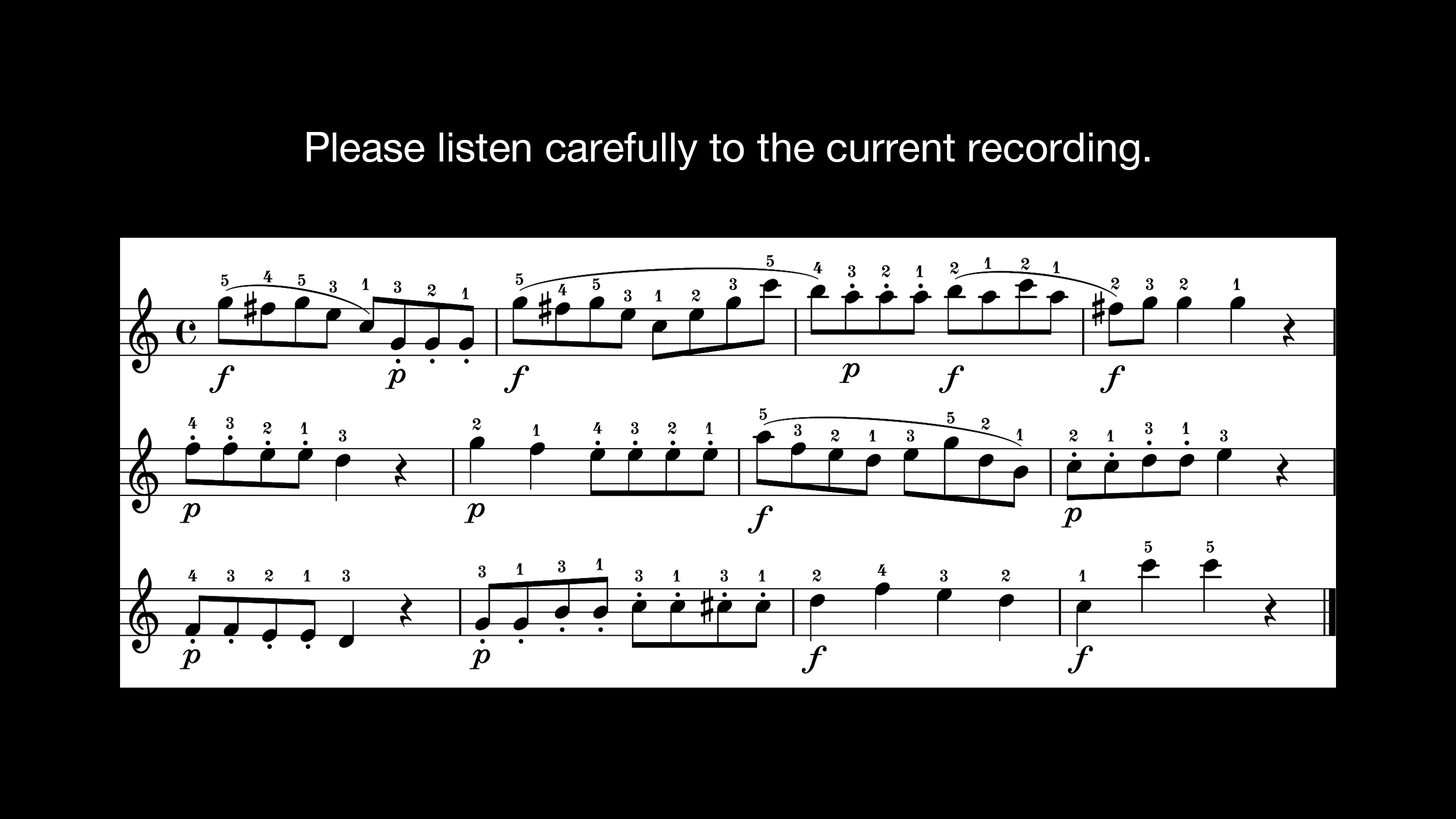
<style>
.page{position:relative;width:1456px;height:819px;background:#000000}
.page>*{position:absolute;margin:0}
.t1{font:40.9px "HelveticaNeue";color:#ffffff}
</style>
<div class="page">
<p class="t1" style="left:307px;top:132px;width:842px;height:38px">Please listen carefully to the current recording.</p>
</div>
